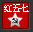
<style>
.page{position:relative;width:33px;height:32px;background:#c50000}
.page>*{position:absolute;margin:0}
.t1{font:10.4px "SimSun";letter-spacing:-0.25em;color:#ffffff}
</style>
<div class="page">
<p class="t1" style="left:4px;top:4px;width:25px;height:8px">红五七</p>
</div>
